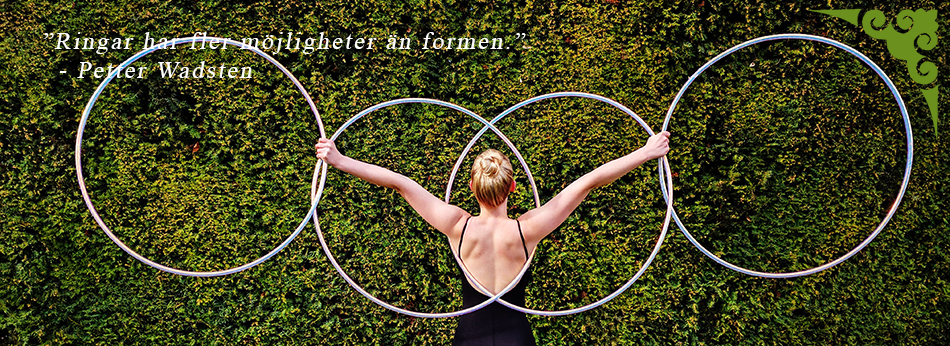
<style>
.page{position:relative;width:950px;height:346px}
.page>*{position:absolute;margin:0}
.t1{font:24px "TimesNewRomanPSMT";letter-spacing:0.1em;color:#ffffff;font-style:italic}
</style>
<div class="page">
<p class="t1" style="left:44px;top:32px;width:482px;height:46px">”Ringar har fler möjligheter än formen.”<br> - Petter Wadsten</p>
</div>
